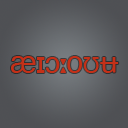
<style>
.page{position:relative;width:128px;height:128px}
.page>*{position:absolute;margin:0}
.t1{font:30px "Helvetica";color:#c43018}
</style>
<div class="page">
<p class="t1" style="left:11px;top:56px;width:108px;height:17px">æɪɔːoʊʉ</p>
</div>
